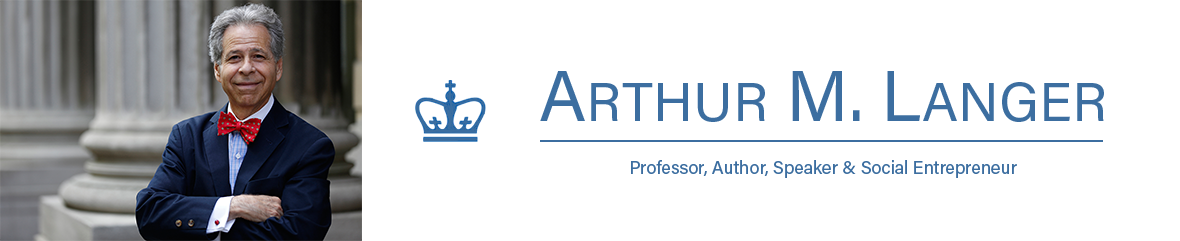
<style>
.page{position:relative;width:1180px;height:241px;background:#ffffff}
.page>*{position:absolute;margin:0}
.t1{font:55px "AcuminPro-Regular";color:#3c6ea0}
.t2{font:72px "AcuminPro-Regular";color:#3c6ea0}
.t3{font:18px "AcuminPro-Regular";color:#3c6ea0}
</style>
<div class="page">
<p class="t1" style="left:540px;top:71px;width:564px;height:51px"><span class="t2">A</span>RTHUR<span class="t2"> M. L</span>ANGER</p>
<p class="t3" style="left:631px;top:160px;width:386px;height:18px">Professor, Author, Speaker &amp; Social Entrepreneur</p>
</div>
